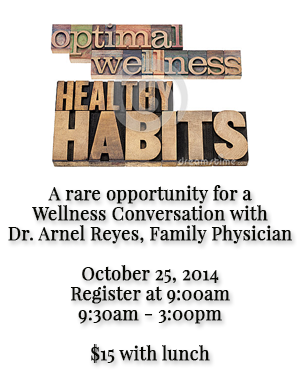
<style>
.page{position:relative;width:300px;height:392px;background:#ffffff}
.page>*{position:absolute;margin:0}
.t1{font:18px/20px "PlayfairDisplay-Regular";color:#080904;font-weight:bold}
</style>
<div class="page">
<p class="t1" style="left:8px;top:185px;width:284px;height:178px;text-align:center">A rare opportunity for a <br>Wellness Conversation with<br>Dr. Arnel Reyes, Family Physician<br><br>October 25, 2014<br>Register at 9:00am<br>9:30am - 3:00pm<br><br>$15 with lunch</p>
</div>
